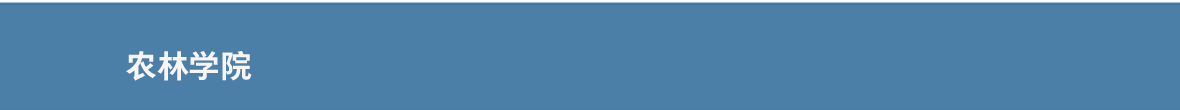
<style>
.page{position:relative;width:1180px;height:110px;background:#4b7fa7}
.page>*{position:absolute;margin:0}
.t1{font:32.1px "FZYOUHGB18030_CU--GB1-4";letter-spacing:-0.01em;color:#faf5f5}
</style>
<div class="page">
<p class="t1" style="left:126px;top:51px;width:126px;height:30px">农林学院</p>
</div>
